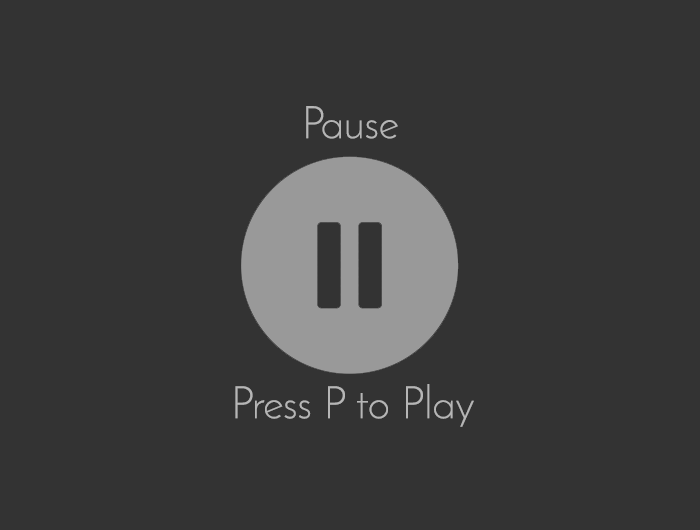
<style>
.page{position:relative;width:700px;height:530px;background:#333333}
.page>*{position:absolute;margin:0}
.t1{font:45px "JosefinSans-Light";color:#b6b6b6}
</style>
<div class="page">
<p class="t1" style="left:306px;top:106px;width:92px;height:33px">Pause</p>
<p class="t1" style="left:235px;top:384px;width:239px;height:43px">Press P to Play</p>
</div>
